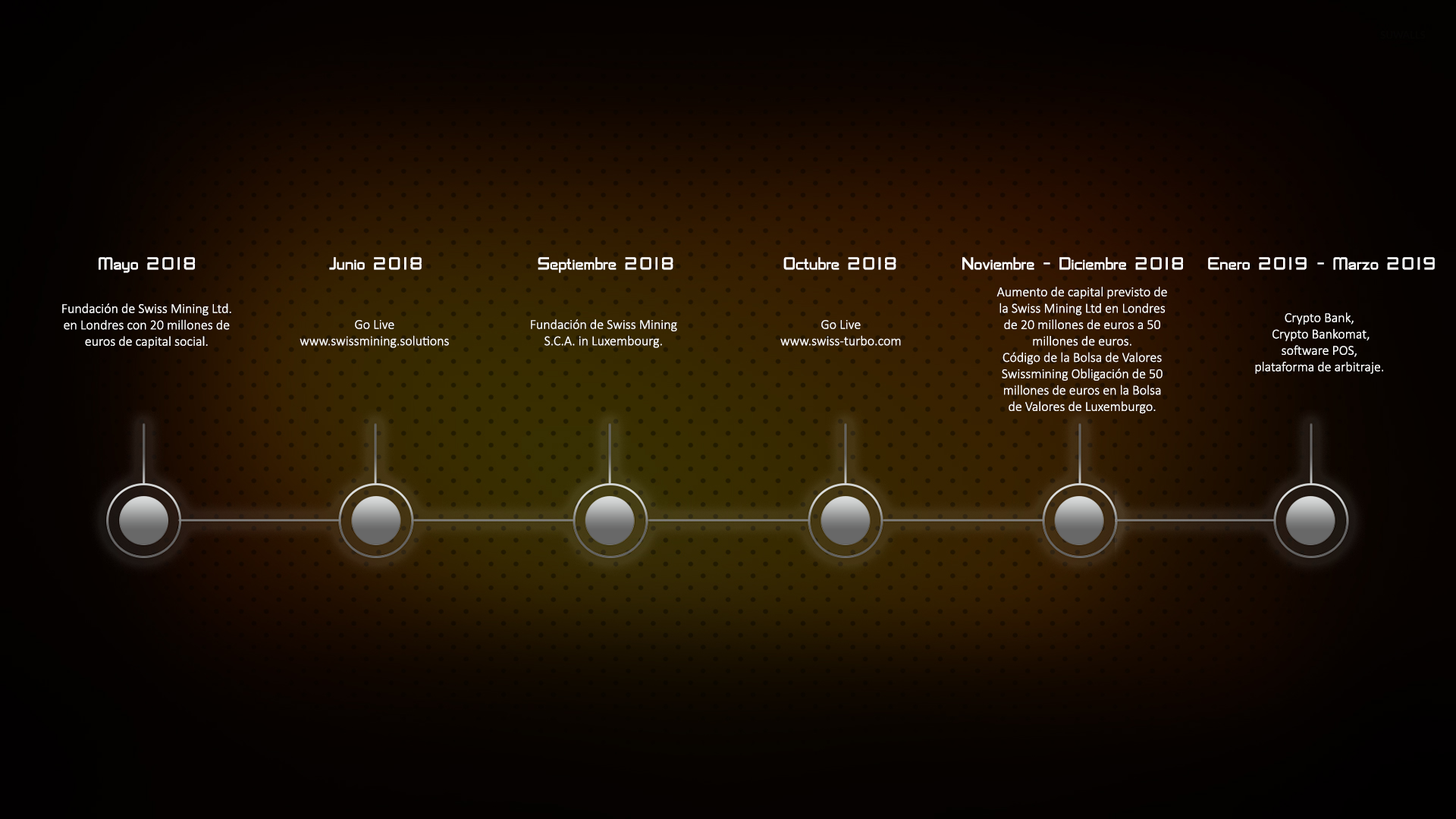
<style>
.page{position:relative;width:1456px;height:819px}
.page>*{position:absolute;margin:0}
.t1{font:18.2px "SFChaerilidae";color:#ffffff}
.t2{font:13.6px "Calibri-Light";color:#ffffff}
</style>
<div class="page">
<p class="t1" style="left:99px;top:257px;width:96px;height:16px">Mayo 2018</p>
<p class="t1" style="left:329px;top:257px;width:93px;height:13px">Junio 2018</p>
<p class="t1" style="left:538px;top:257px;width:135px;height:16px">Septiembre 2018</p>
<p class="t1" style="left:783px;top:257px;width:113px;height:13px">Octubre 2018</p>
<p class="t1" style="left:962px;top:257px;width:221px;height:13px">Noviembre - Diciembre 2018</p>
<p class="t1" style="left:1208px;top:257px;width:227px;height:13px">Enero 2019 - Marzo 2019</p>
<p class="t2" style="left:996px;top:287px;width:171px;height:127px;text-align:center">Aumento de capital previsto de la Swiss Mining Ltd en Londres de 20 millones de euros a 50 millones de euros.<br>Código de la Bolsa de Valores Swissmining Obligación de 50 millones de euros en la Bolsa de Valores de Luxemburgo.</p>
<p class="t2" style="left:62px;top:303px;width:169px;height:46px;text-align:center">Fundación de Swiss Mining Ltd. en Londres con 20 millones de euros de capital social.</p>
<p class="t2" style="left:1255px;top:312px;width:128px;height:62px;text-align:center">Crypto Bank,<br> Crypto Bankomat, <br>software POS, <br>plataforma de arbitraje.</p>
<p class="t2" style="left:300px;top:320px;width:149px;height:28px;text-align:center">Go Live <br>www.swissmining.solutions</p>
<p class="t2" style="left:531px;top:319px;width:146px;height:29px;text-align:center">Fundación de Swiss Mining S.C.A. in Luxembourg.</p>
<p class="t2" style="left:780px;top:320px;width:121px;height:26px;text-align:center">Go Live <br>www.swiss-turbo.com</p>
</div>
